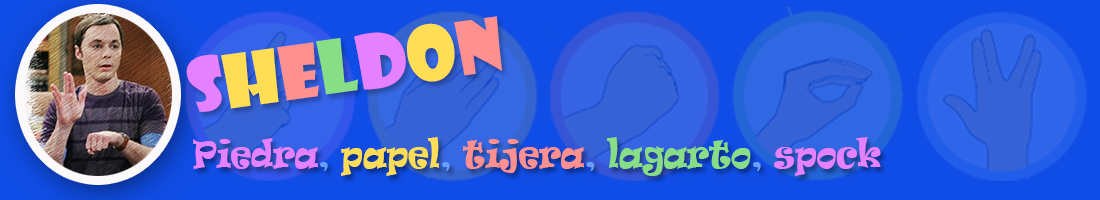
<style>
.page{position:relative;width:1100px;height:200px;background:#104de6}
.page>*{position:absolute;margin:0}
.t1{font:72px "ShowcardGothic-Reg";color:#e580ff}
.t2{font:72px "ShowcardGothic-Reg";color:#ffdd55}
.t3{font:72px "ShowcardGothic-Reg";color:#ff9090}
.t4{font:72px "ShowcardGothic-Reg";color:#87de87}
.t5{font:35.7px "Ravie";color:#87de87;scale:0.79 1}
.t6{font:35.7px "Ravie";color:#e580ff;scale:0.79 1}
.t7{font:35.7px "Ravie";color:#679ffb;scale:0.79 1}
.t8{font:35.7px "Ravie";color:#ffdd55;scale:0.79 1}
.t9{font:35.7px "Ravie";color:#ff9090;scale:0.79 1}
</style>
<div class="page">
<p class="t1" style="left:186px;top:16px;width:316px;height:96px;rotate:-8deg">S<span class="t2">h</span><span class="t3">e</span><span class="t4">l</span>d<span class="t2">o</span><span class="t3">n</span></p>
<p class="t5" style="left:193px;top:137px;width:688px;height:39px"><span class="t6">Piedra</span><span class="t7">, </span><span class="t8">papel</span><span class="t7">, </span><span class="t9">tijera</span><span class="t7">, </span>lagarto<span class="t7">, </span><span class="t6">spock</span></p>
</div>
